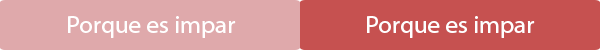
<style>
.page{position:relative;width:600px;height:50px;background:#dfa9ab}
.page>*{position:absolute;margin:0}
.t1{font:25px "MyriadHebrew-Regular";color:#ffffff}
</style>
<div class="page">
<p class="t1" style="left:68px;top:16px;width:168px;height:22px">Porque es impar</p>
<p class="t1" style="left:367px;top:16px;width:168px;height:22px">Porque es impar</p>
</div>
